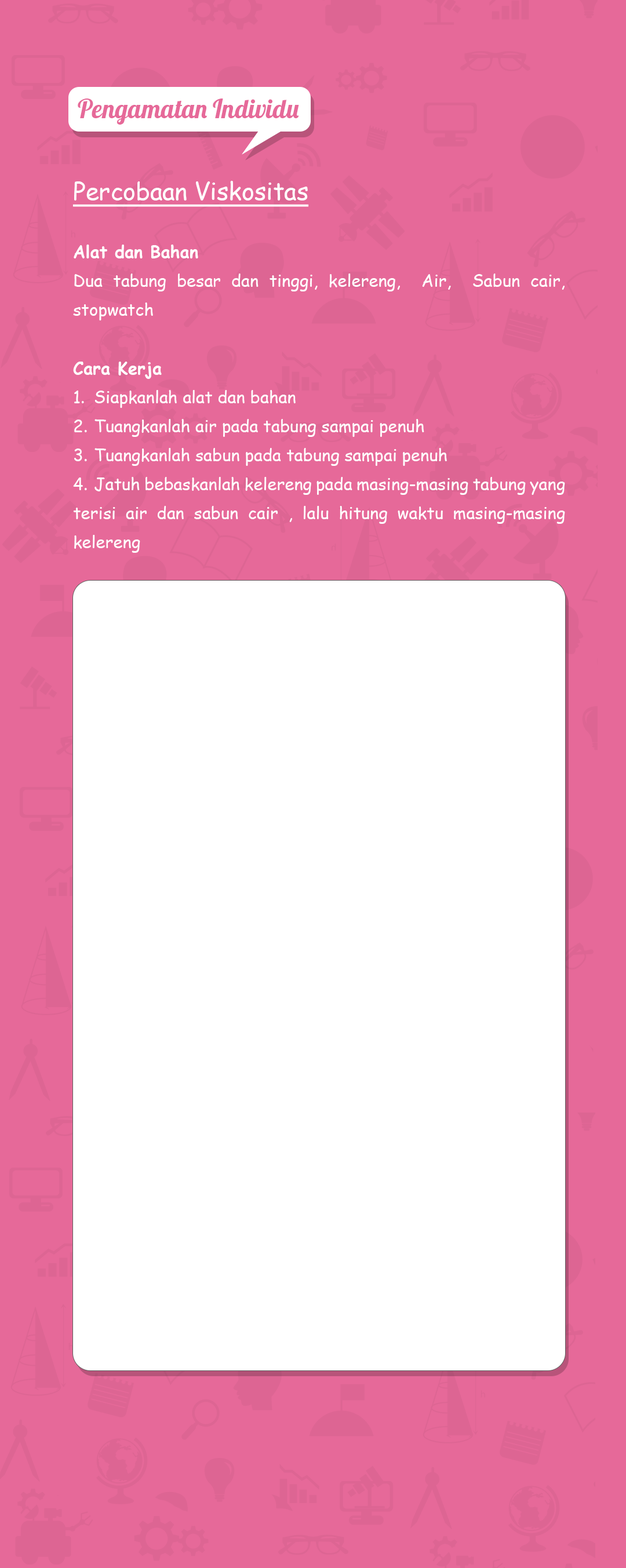
<style>
.page{position:relative;width:626px;height:1568px;background:#e66999}
.page>*{position:absolute;margin:0}
.t1{font:25.8px "Lobster-Regular";color:#e66999}
.t2{font:16.9px/29px "ComicSansMS";color:#ffffff}
.t3{font:24.2px/29px "ComicSansMS";color:#ffffff;text-decoration:underline}
.t4{font:16.9px/29px "ComicSansMS-Bold";color:#ffffff}
</style>
<div class="page">
<p class="t1" style="left:78px;top:99px;width:221px;height:26px">Pengamatan Individu</p>
<p class="t2" style="left:72px;top:181px;width:493px;height:372px;text-align:justify"><span class="t3">Percobaan Viskositas<br><br></span><span class="t4">Alat dan Bahan <br></span>Dua tabung besar dan tinggi, kelereng,  Air,  Sabun cair, stopwatch<br><br><span class="t4">Cara Kerja<br></span>1. Siapkanlah alat dan bahan<br>2. Tuangkanlah air pada tabung sampai penuh<br>3. Tuangkanlah sabun pada tabung sampai penuh<br>4. Jatuh bebaskanlah kelereng pada masing-masing tabung yang terisi air dan sabun cair , lalu hitung waktu masing-masing kelereng</p>
</div>
